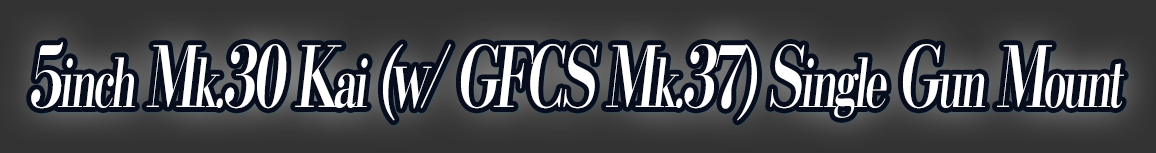
<style>
.page{position:relative;width:1156px;height:153px}
.page>*{position:absolute;margin:0}
.t1{font:84px "KochoStd-Heavy";letter-spacing:-0.08em;color:#ffffff;font-style:italic;scale:0.63 1}
.t2{font:67.2px "KochoStd-Heavy";letter-spacing:-0.08em;color:#ffffff;font-style:italic;scale:0.63 1}
</style>
<div class="page">
<p class="t1" style="left:31px;top:42px;width:1093px;height:79px">5<span class="t2">inch</span> M<span class="t2">k.</span>30 K<span class="t2">ai</span> (w/ GFCS M<span class="t2">k.</span>37) S<span class="t2">ingle</span> G<span class="t2">un</span> M<span class="t2">ount</span></p>
</div>
